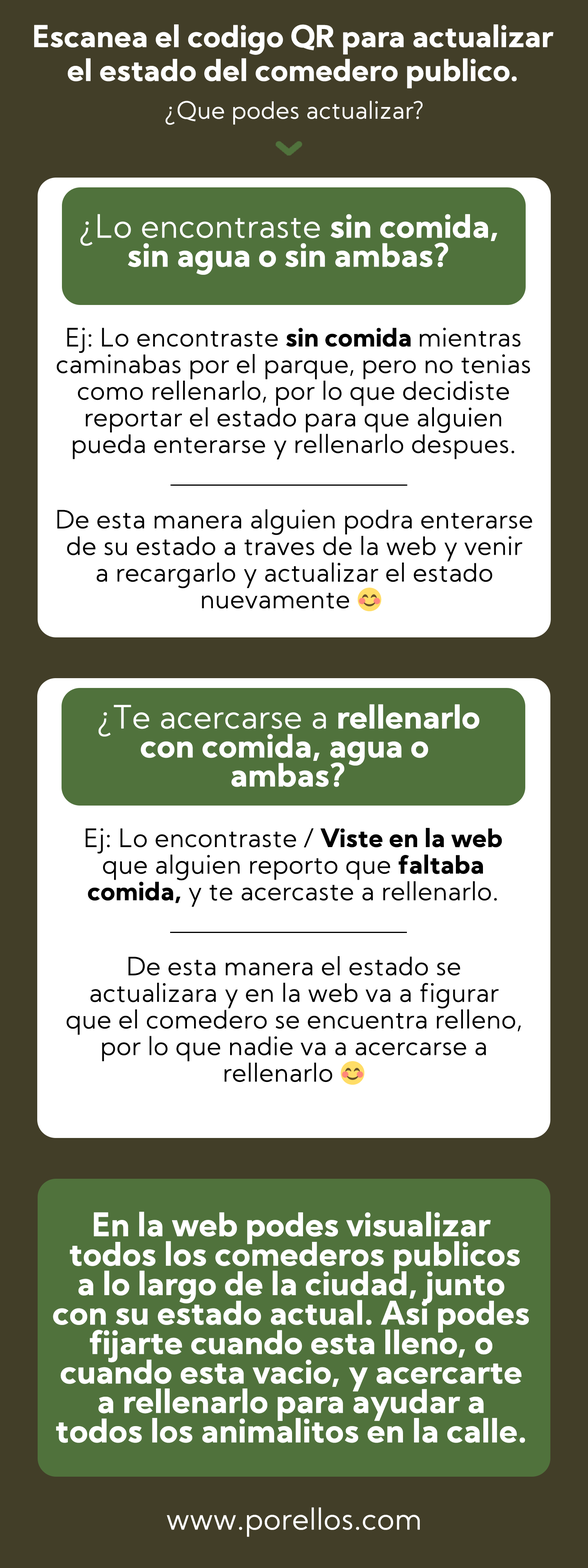
<style>
.page{position:relative;width:588px;height:1568px;background:#ffffff}
.page>*{position:absolute;margin:0}
.t1{font:29.9px/26.8px "KumbhSans-Bold";letter-spacing:-0.02em;color:#ffffff;font-weight:bold}
.t2{font:23.5px "KumbhSans-Light";letter-spacing:-0.02em;color:#ffffff;font-weight:bold}
.t3{font:31.8px/23px "KumbhSans-Bold";letter-spacing:-0.02em;color:#ffffff;font-weight:bold}
.t4{font:31.8px/23px "KumbhSans-Light";letter-spacing:-0.02em;color:#ffffff;font-weight:bold}
.t5{font:25.1px/21.1px "KumbhSans-Light";letter-spacing:-0.02em;color:#000000;font-weight:bold}
.t6{font:25.1px/21.1px "KumbhSans-Bold";letter-spacing:-0.02em;color:#000000;font-weight:bold}
.t7{font:25.1px/21.1px "EmojiOneColor";letter-spacing:-0.02em;color:#000000;font-weight:bold}
.t8{font:32.2px/23.4px "KumbhSans-Bold";letter-spacing:-0.02em;color:#ffffff;font-weight:bold}
.t9{font:29.1px "KumbhSans-Light";letter-spacing:-0.02em;color:#ffffff;font-weight:bold}
</style>
<div class="page">
<p class="t1" style="left:34px;top:24px;width:520px;height:65px;text-align:center">Escanea el codigo QR para actualizar<br>el estado del comedero publico.</p>
<p class="t2" style="left:165px;top:101px;width:258px;height:24px">¿Que podes actualizar?</p>
<p class="t3" style="left:80px;top:214px;width:417px;height:61px;text-align:center"><span class="t4">¿Lo encontraste </span>sin comida,<br>sin agua o sin ambas?</p>
<p class="t5" style="left:56px;top:328px;width:474px;height:131px;text-align:center">Ej: Lo encontraste <span class="t6">sin comida </span>mientras<br>caminabas por el parque, pero no tenias<br>como rellenarlo, por lo que decidiste<br>reportar el estado para que alguien<br>pueda enterarse y rellenarlo despues.</p>
<p class="t5" style="left:57px;top:509px;width:475px;height:103px;text-align:center">De esta manera alguien podra enterarse<br>de su estado a traves de la web y venir<br>a recargarlo y actualizar el estado<br>nuevamente <span class="t7">😊</span></p>
<p class="t3" style="left:98px;top:704px;width:381px;height:83px;text-align:center"><span class="t4">¿Te acercarse a </span>rellenarlo<br>con comida, agua o <br>ambas?</p>
<p class="t5" style="left:85px;top:828px;width:417px;height:79px;text-align:center">Ej: Lo encontraste / <span class="t6">Viste en la web<br></span>que alguien reporto que <span class="t6">faltaba<br>comida, </span>y te acercaste a rellenarlo.</p>
<p class="t5" style="left:67px;top:956px;width:454px;height:129px;text-align:center">De esta manera el estado se<br>actualizara y en la web va a figurar<br>que el comedero se encuentra relleno,<br>por lo que nadie va a acercarse a<br>rellenarlo <span class="t7">😊</span></p>
<p class="t8" style="left:53px;top:1212px;width:476px;height:231px;text-align:center">En la web podes visualizar<br> todos los comederos publicos<br>a lo largo de la ciudad, junto<br>con su estado actual. Asi podes<br>fijarte cuando esta lleno, o<br>cuando esta vacio, y acercarte<br>a rellenarlo para ayudar a<br>todos los animalitos en la calle.</p>
<p class="t9" style="left:167px;top:1507px;width:253px;height:30px">www.porellos.com</p>
</div>
